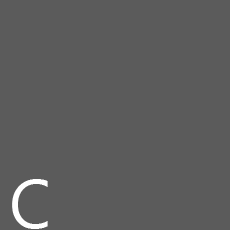
<style>
.page{position:relative;width:230px;height:230px;background:#5b5b5b}
.page>*{position:absolute;margin:0}
.t1{font:67.7px "Leelawadee";color:#ffffff}
</style>
<div class="page">
<p class="t1" style="left:12px;top:179px;width:36px;height:50px">C</p>
</div>
